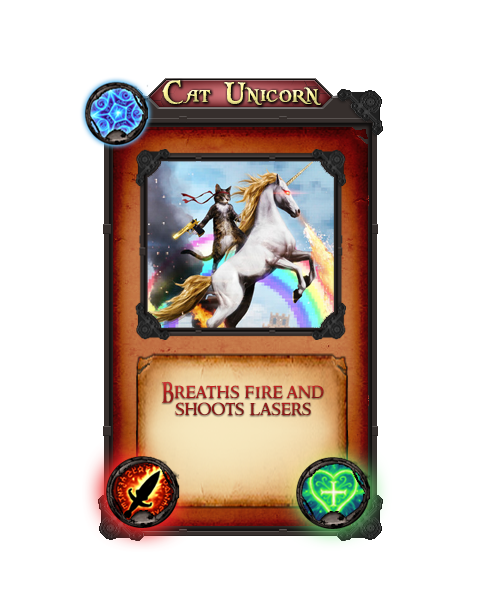
<style>
.page{position:relative;width:500px;height:600px;background:#ffffff}
.page>*{position:absolute;margin:0}
.t1{font:34px "PiecesofEight"}
.t2{font:20px/17px "RingbearerMedium"}
</style>
<div class="page">
<p class="t1" style="left:162px;top:80px;width:159px;height:25px">Cat Unicorn</p>
<p class="t2" style="left:162px;top:381px;width:162px;height:35px;text-align:center">Breaths fire and shoots lasers</p>
</div>
